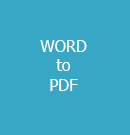
<style>
.page{position:relative;width:130px;height:135px;background:#38a6c5}
.page>*{position:absolute;margin:0}
.t1{font:12px "Tahoma";color:#ffffff}
</style>
<div class="page">
<p class="t1" style="left:40px;top:40px;width:47px;height:51px;text-align:center">WORD<br>to<br>PDF</p>
</div>
